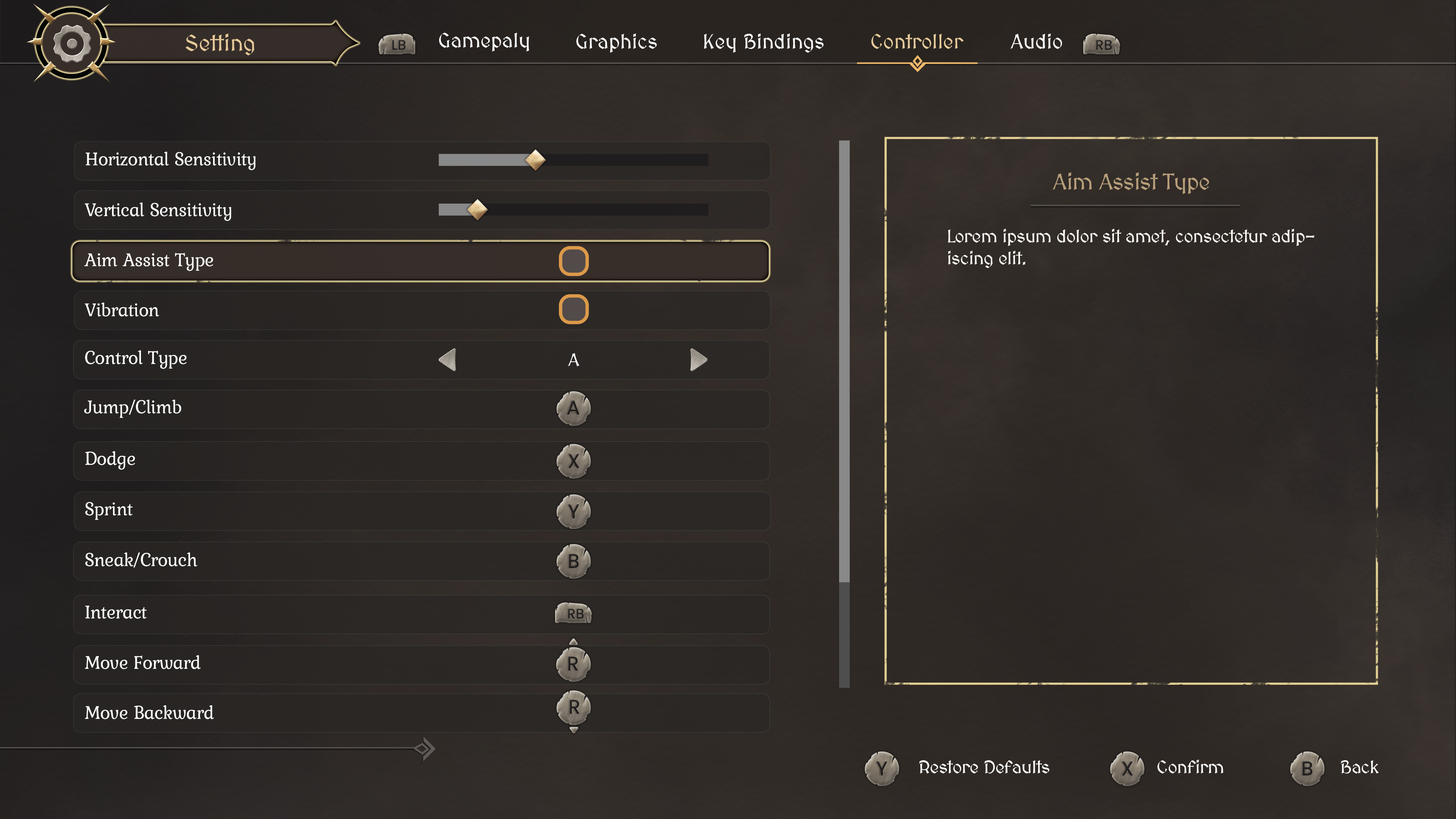
<style>
.page{position:relative;width:1456px;height:819px}
.page>*{position:absolute;margin:0}
.t1{font:22.7px "MedievalSharp";color:#e6c899}
.t2{font:20.5px "MedievalSharp";color:#fefefe}
.t3{font:20.5px "MedievalSharp";color:#ffffff}
.t4{font:20.5px "MedievalSharp";color:#e7cb9c}
.t5{font:19.2px "Kurale-Regular";letter-spacing:-0.02em;color:#ffffff}
.t6{font:22.7px "MedievalSharp";letter-spacing:-0.02em;color:#b79f7b}
.t7{font:18.2px "MedievalSharp";letter-spacing:-0.02em;color:#fffbf5}
.t8{font:18.2px "MedievalSharp";letter-spacing:-0.02em;color:#ffffff}
</style>
<div class="page">
<p class="t1" style="left:185px;top:33px;width:69px;height:22px">Setting</p>
<p class="t2" style="left:439px;top:33px;width:90px;height:19px">Gamepaly</p>
<p class="t3" style="left:576px;top:33px;width:81px;height:20px">Graphics</p>
<p class="t3" style="left:704px;top:33px;width:120px;height:20px">Key Bindings</p>
<p class="t4" style="left:871px;top:34px;width:93px;height:15px">Controller</p>
<p class="t3" style="left:1010px;top:33px;width:52px;height:16px">Audio</p>
<p class="t5" style="left:85px;top:152px;width:171px;height:18px">Horizontal Sensitivity</p>
<p class="t6" style="left:1053px;top:172px;width:156px;height:22px">Aim Assist Type</p>
<p class="t5" style="left:85px;top:202px;width:146px;height:19px">Vertical Sensitivity</p>
<p class="t7" style="left:948px;top:229px;width:367px;height:39px">Lorem ipsum dolor sit amet, consectetur adipiscing elit.</p>
<p class="t5" style="left:84px;top:253px;width:129px;height:18px">Aim Assist Type</p>
<p class="t5" style="left:85px;top:303px;width:74px;height:14px">Vibration</p>
<p class="t5" style="left:85px;top:350px;width:102px;height:19px">Control Type</p>
<p class="t8" style="left:568px;top:353px;width:11px;height:13px">A</p>
<p class="t5" style="left:84px;top:400px;width:97px;height:18px">Jump/Climb</p>
<p class="t5" style="left:85px;top:451px;width:50px;height:19px">Dodge</p>
<p class="t5" style="left:85px;top:502px;width:48px;height:18px">Sprint</p>
<p class="t5" style="left:85px;top:552px;width:113px;height:16px">Sneak/Crouch</p>
<p class="t5" style="left:85px;top:606px;width:62px;height:13px">Interact</p>
<p class="t5" style="left:85px;top:655px;width:116px;height:14px">Move Forward</p>
<p class="t5" style="left:85px;top:705px;width:129px;height:14px">Move Backward</p>
<p class="t8" style="left:919px;top:760px;width:131px;height:13px">Restore Defaults</p>
<p class="t8" style="left:1157px;top:759px;width:67px;height:14px">Confirm</p>
<p class="t8" style="left:1341px;top:760px;width:38px;height:13px">Back</p>
</div>
